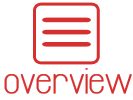
<style>
.page{position:relative;width:133px;height:100px;background:#ffffff}
.page>*{position:absolute;margin:0}
.t1{font:35.4px "Infinity";letter-spacing:-0.02em;color:#d72e2e;font-weight:bold}
</style>
<div class="page">
<p class="t1" style="left:4px;top:68px;width:128px;height:26px">overview</p>
</div>
